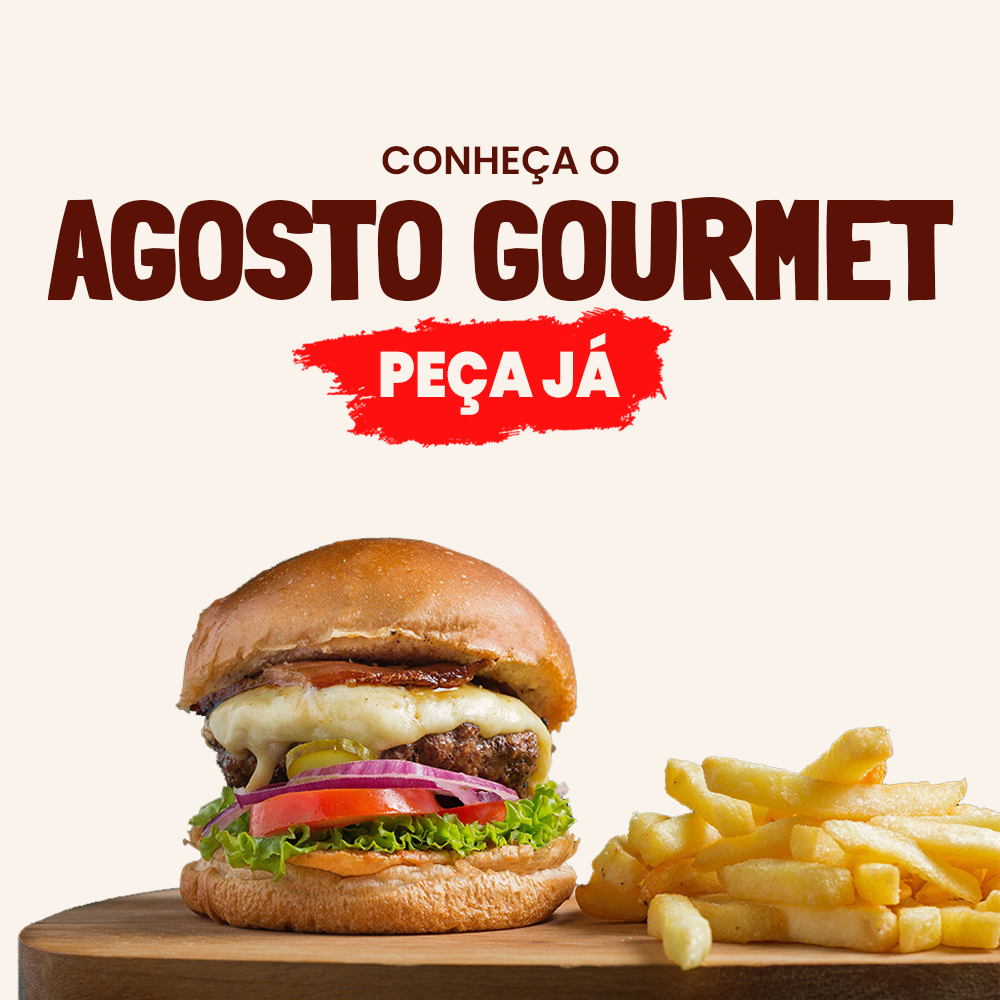
<style>
.page{position:relative;width:1000px;height:1000px;background:#faf3eb}
.page>*{position:absolute;margin:0}
.t1{font:39.5px "Poppins-SemiBold";color:#5b1105}
.t2{font:140.9px "LondrinaSolid-Black";color:#5b1105}
.t3{font:63.7px "Poppins-Black";color:#faf3eb;scale:0.89 1}
</style>
<div class="page">
<p class="t1" style="left:382px;top:146px;width:237px;height:39px">CONHEÇA O</p>
<p class="t2" style="left:47px;top:197px;width:907px;height:104px">AGOSTO GOURMET</p>
<p class="t3" style="left:380px;top:333px;width:240px;height:82px">PEÇA JÁ</p>
</div>
